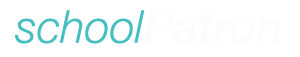
<style>
.page{position:relative;width:300px;height:57px;background:#ffffff}
.page>*{position:absolute;margin:0}
.t1{font:45.2px "HelveticaNeue-LightItalic";color:#47bfc2}
.t2{font:45.2px "HelveticaNeue-MediumItalic";color:#fdfcfd}
</style>
<div class="page">
<p class="t1" style="left:15px;top:10px;width:266px;height:34px">school<span class="t2">Patron</span></p>
</div>
